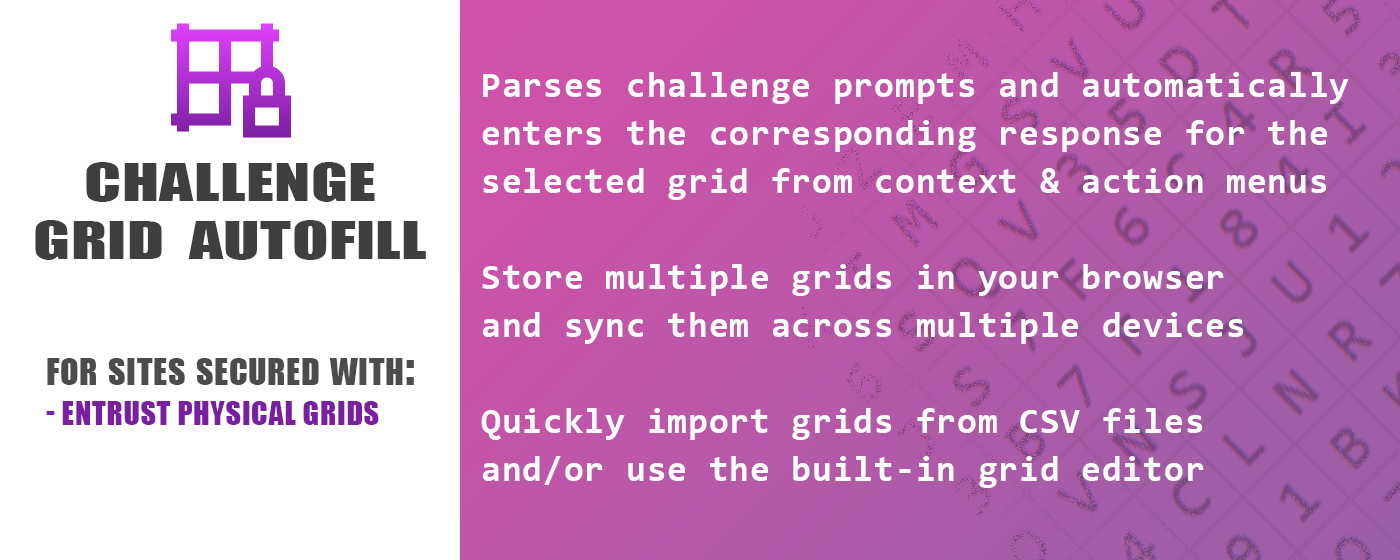
<style>
.page{position:relative;width:1400px;height:560px;background:#ffffff}
.page>*{position:absolute;margin:0}
.t1{font:36px/48px "Consolas-Bold";letter-spacing:0.025em;color:#ffffff}
.t2{font:48px "Impact";letter-spacing:0.005em;color:#3f3f3f;text-transform:uppercase;scale:1.4 1}
.t3{font:48px "Impact";letter-spacing:0.025em;color:#4c4c4c;font-variant:small-caps}
.t4{font:30px "Impact";letter-spacing:0.025em;color:#7b1fa2;text-transform:uppercase}
</style>
<div class="page">
<p class="t1" style="left:481px;top:72px;width:868px;height:416px">Parses challenge prompts and automatically<br>enters the corresponding response for the<br>selected grid from context &amp; action menus<br><br>Store multiple grids in your browser<br>and sync them across multiple devices<br><br>Quickly import grids from CSV files<br>and/or use the built-in grid editor</p>
<p class="t2" style="left:35px;top:162px;width:391px;height:98px;text-align:center">Challenge<br>Grid  Autofill</p>
<p class="t3" style="left:47px;top:358px;width:367px;height:27px">for sites secured with:</p>
<p class="t4" style="left:46px;top:401px;width:333px;height:24px">- Entrust physical Grids</p>
</div>
